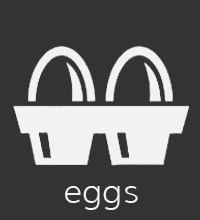
<style>
.page{position:relative;width:200px;height:220px;background:#333333}
.page>*{position:absolute;margin:0}
.t1{font:33.3px "Muli-Light";color:#f2f2f2}
</style>
<div class="page">
<p class="t1" style="left:65px;top:186px;width:73px;height:24px">eggs</p>
</div>
